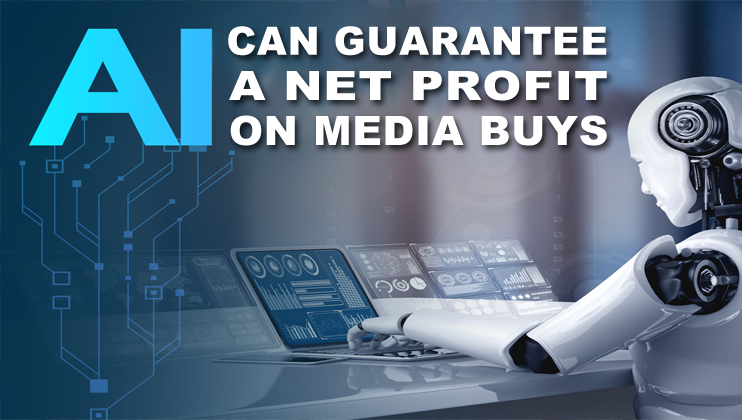
<style>
.page{position:relative;width:742px;height:420px}
.page>*{position:absolute;margin:0}
.t1{font:39.1px "Arial-Black";letter-spacing:0.02em;color:#ffffff}
.t2{font:40.5px "Arial-Black";letter-spacing:0.02em;color:#ffffff;scale:1.16 1}
.t3{font:40.5px "Arial-Black";letter-spacing:0.02em;color:#ffffff}
</style>
<div class="page">
<p class="t1" style="left:228px;top:26px;width:379px;height:30px">CAN GUARANTEE</p>
<p class="t2" style="left:229px;top:70px;width:378px;height:31px">A NET PROFIT</p>
<p class="t3" style="left:230px;top:115px;width:377px;height:31px">ON MEDIA BUYS</p>
</div>
